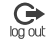
<style>
.page{position:relative;width:54px;height:40px;background:#ffffff}
.page>*{position:absolute;margin:0}
.t1{font:14.2px "Infinity";letter-spacing:-0.02em;color:#3f3f3f;font-weight:bold}
</style>
<div class="page">
<p class="t1" style="left:10px;top:25px;width:36px;height:14px">log out</p>
</div>
